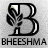
<style>
.page{position:relative;width:48px;height:48px}
.page>*{position:absolute;margin:0}
.t1{font:9.7px "MyriadPro-Regular";color:#000000}
</style>
<div class="page">
<p class="t1" style="left:1px;top:38px;width:46px;height:7px">BHEESHMA</p>
</div>
